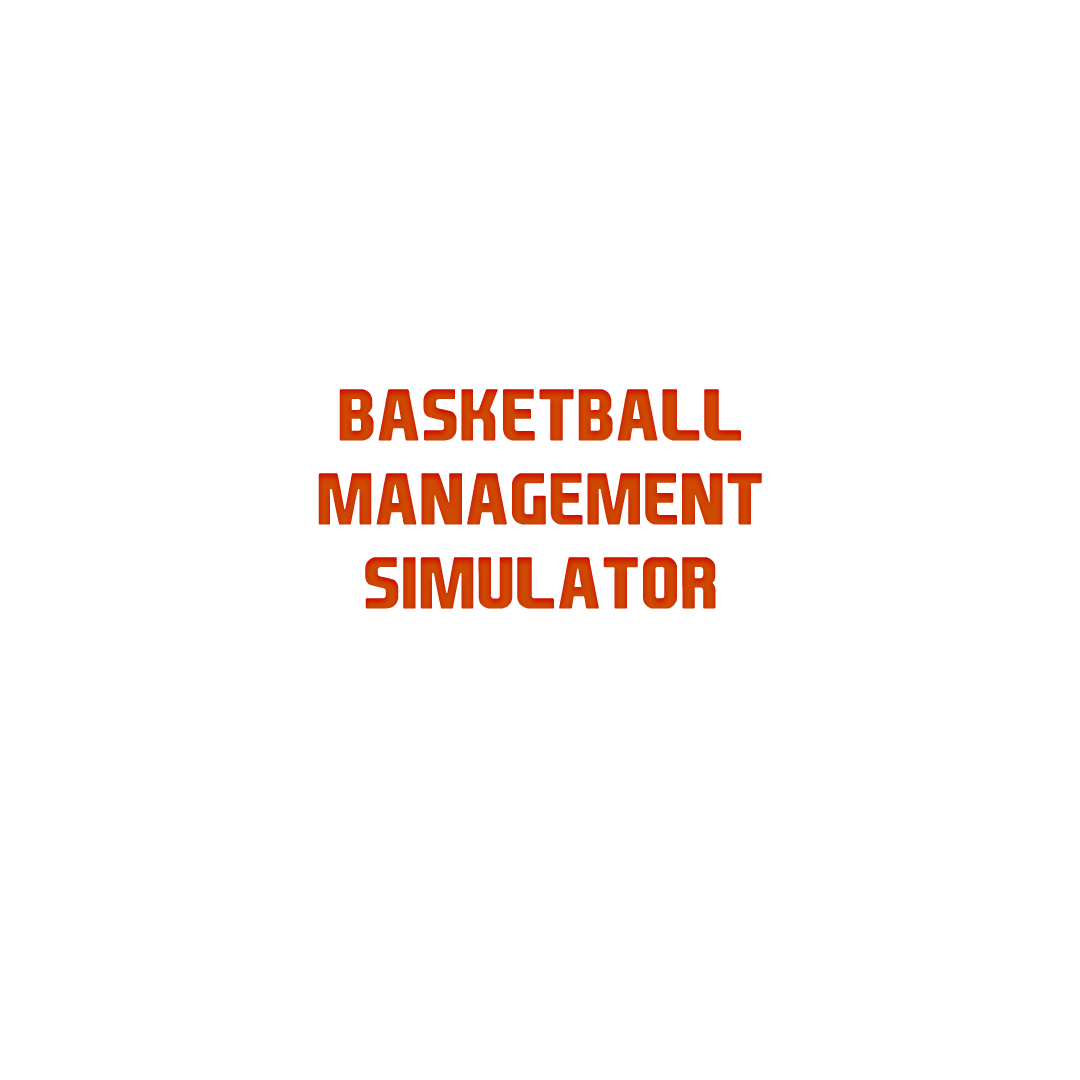
<style>
.page{position:relative;width:1080px;height:1080px;background:#ffffff}
.page>*{position:absolute;margin:0}
.t1{font:70px "EASPORTS";color:#ce4a02}
</style>
<div class="page">
<p class="t1" style="left:318px;top:389px;width:444px;height:220px;text-align:center">Basketball Management simulator</p>
</div>
